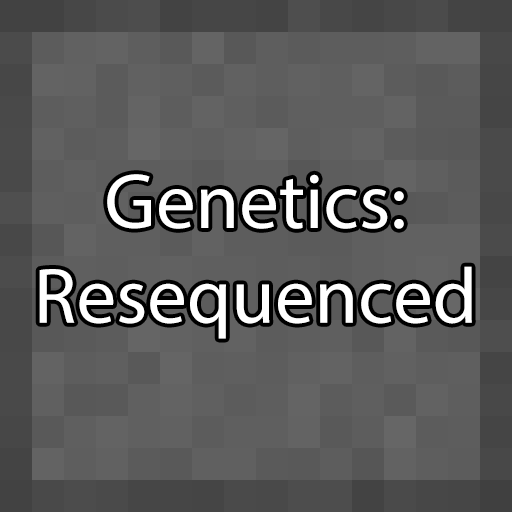
<style>
.page{position:relative;width:512px;height:512px}
.page>*{position:absolute;margin:0}
.t1{font:79px "MyriadPro-Regular";color:#ffffff}
</style>
<div class="page">
<p class="t1" style="left:39px;top:174px;width:433px;height:165px;text-align:center">Genetics:<br>Resequenced</p>
</div>
